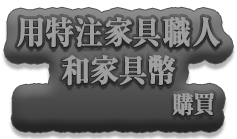
<style>
.page{position:relative;width:237px;height:139px}
.page>*{position:absolute;margin:0}
.t1{font:32px/38px "RyuminPro-ExBold";color:#9f9f9f;font-weight:bold;scale:0.9 1}
.t2{font:24px/30px "RyuminPro-ExBold";color:#9f9f9f;font-weight:bold;scale:0.9 1}
</style>
<div class="page">
<p class="t1" style="left:17px;top:16px;width:203px;height:100px;text-align:center">用特注家具職人<br>和家具幣<br>                         <span class="t2">購買</span></p>
</div>
